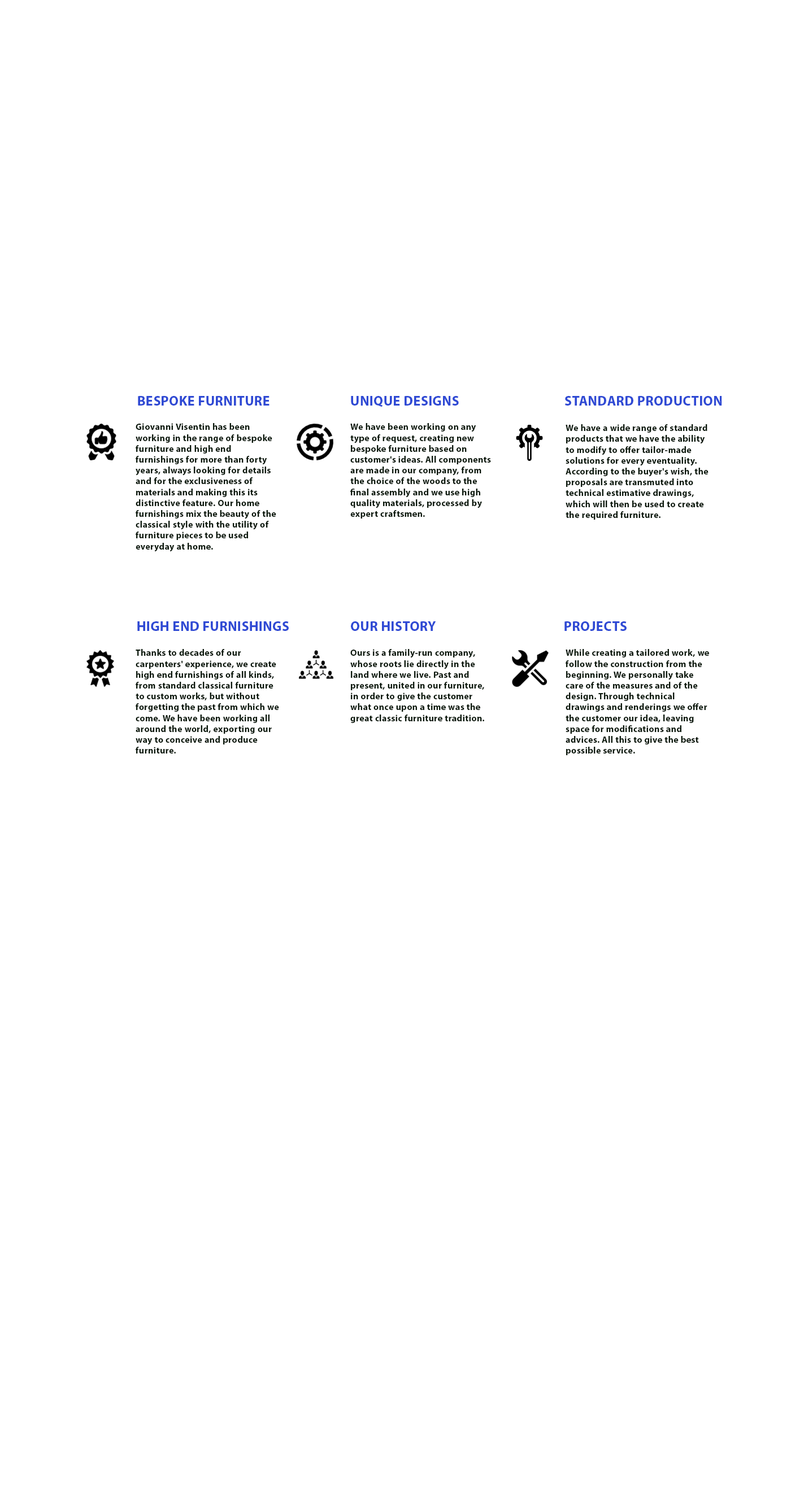
<style>
.page{position:relative;width:791px;height:1507px;background:#ffffff}
.page>*{position:absolute;margin:0}
.t1{font:13.6px "MyriadPro-Bold";letter-spacing:0.02em;color:#2f4ad4}
.t2{font:9px "MyriadPro-Bold";letter-spacing:0.025em;color:#0b180c}
</style>
<div class="page">
<p class="t1" style="left:138px;top:396px;width:132px;height:10px">BESPOKE FURNITURE</p>
<p class="t1" style="left:351px;top:396px;width:108px;height:11px">UNIQUE DESIGNS</p>
<p class="t1" style="left:565px;top:396px;width:157px;height:10px">STANDARD PRODUCTION</p>
<p class="t2" style="left:136px;top:423px;width:140px;height:129px">Giovanni Visentin has been working in the range of bespoke furniture and high end furnishings for more than forty years, always looking for details and for the exclusiveness of materials and making this its distinctive feature. Our home furnishings mix the beauty of the classical style with the utility of furniture pieces to be used everyday at home.</p>
<p class="t2" style="left:350px;top:423px;width:141px;height:96px">We have been working on any type of request, creating new bespoke furniture based on customer's ideas. All components are made in our company, from the choice of the woods to the final assembly and we use high quality materials, processed by expert craftsmen.</p>
<p class="t2" style="left:566px;top:424px;width:143px;height:96px">We have a wide range of standard products that we have the ability to modify to offer tailor-made solutions for every eventuality. According to the buyer's wish, the proposals are transmuted into technical estimative drawings, which will then be used to create the required furniture.</p>
<p class="t1" style="left:137px;top:622px;width:152px;height:9px">HIGH END FURNISHINGS</p>
<p class="t1" style="left:351px;top:622px;width:85px;height:9px">OUR HISTORY</p>
<p class="t1" style="left:564px;top:622px;width:63px;height:9px">PROJECTS</p>
<p class="t2" style="left:136px;top:649px;width:143px;height:105px">Thanks to decades of our carpenters' experience, we create high end furnishings of all kinds, from standard classical furniture to custom works, but without forgetting the past from which we come. We have been working all around the world, exporting our way to conceive and produce furniture.</p>
<p class="t2" style="left:350px;top:649px;width:134px;height:74px">Ours is a family-run company, whose roots lie directly in the land where we live. Past and present, united in our furniture, in order to give the customer what once upon a time was the great classic furniture tradition.</p>
<p class="t2" style="left:566px;top:649px;width:143px;height:106px">While creating a tailored work, we follow the construction from the beginning. We personally take care of the measures and of the design. Through technical drawings and renderings we offer the customer our idea, leaving space for modifications and advices. All this to give the best possible service.</p>
</div>
